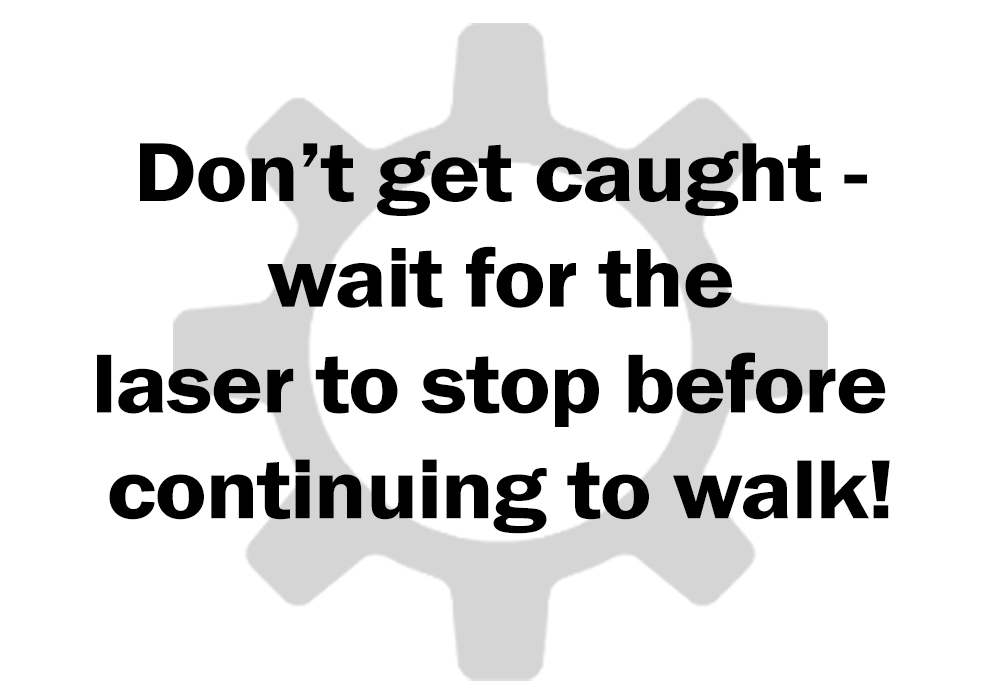
<style>
.page{position:relative;width:1000px;height:700px;background:#ffffff}
.page>*{position:absolute;margin:0}
.t1{font:86.8px/35.3px "FranklinGothic-Demi";letter-spacing:-0.02em;color:#000000;scale:1.13 1}
</style>
<div class="page">
<p class="t1" style="left:97px;top:143px;width:793px;height:391px;text-align:center">Don’t get caught -<br><br><br> wait for the <br><br><br>laser to stop before <br><br><br>continuing to walk!</p>
</div>
